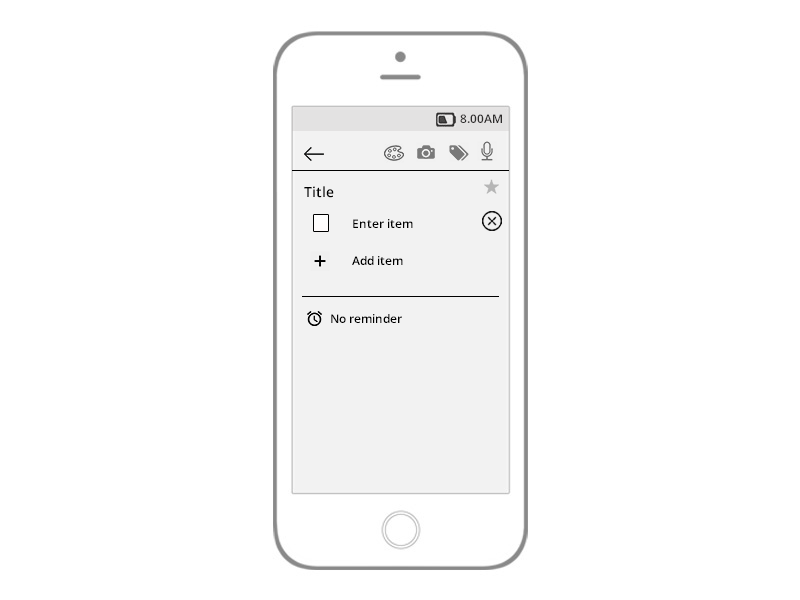
<style>
.page{position:relative;width:800px;height:600px;background:#ffffff}
.page>*{position:absolute;margin:0}
.t1{font:12px "OpenSans-Semibold";color:#2e2d2d}
.t2{font:14px "OpenSans-Semibold";color:#000000}
.t3{font:12px "OpenSans-Semibold";color:#000000}
</style>
<div class="page">
<p class="t1" style="left:460px;top:114px;width:42px;height:9px">8.00AM</p>
<p class="t2" style="left:304px;top:186px;width:30px;height:12px">Title</p>
<p class="t3" style="left:353px;top:219px;width:60px;height:9px">Enter item</p>
<p class="t3" style="left:352px;top:256px;width:51px;height:9px">Add item</p>
<p class="t3" style="left:331px;top:314px;width:71px;height:9px">No reminder</p>
</div>
